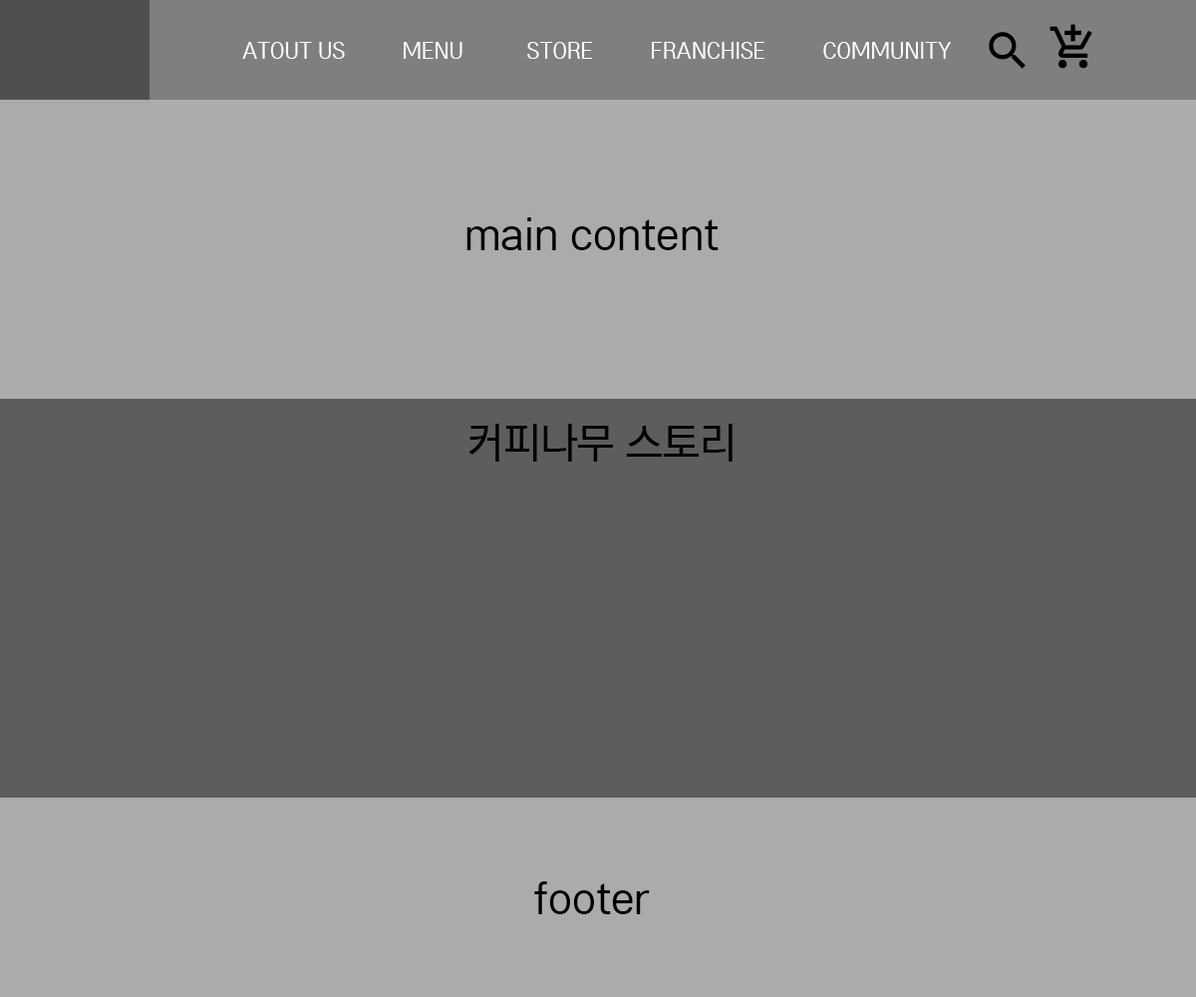
<style>
.page{position:relative;width:1196px;height:997px;background:#ababab}
.page>*{position:absolute;margin:0}
.t1{font:23.9px "LGPC";color:#ffffff}
.t2{font:47.8px "LGPC";color:#000000}
</style>
<div class="page">
<p class="t1" style="left:242px;top:42px;width:710px;height:17px">ATOUT US          MENU           STORE          FRANCHISE          COMMUNITY</p>
<p class="t2" style="left:467px;top:217px;width:252px;height:33px">main content</p>
<p class="t2" style="left:469px;top:424px;width:264px;height:38px">커피나무 스토리</p>
<p class="t2" style="left:534px;top:881px;width:116px;height:33px">footer</p>
</div>
